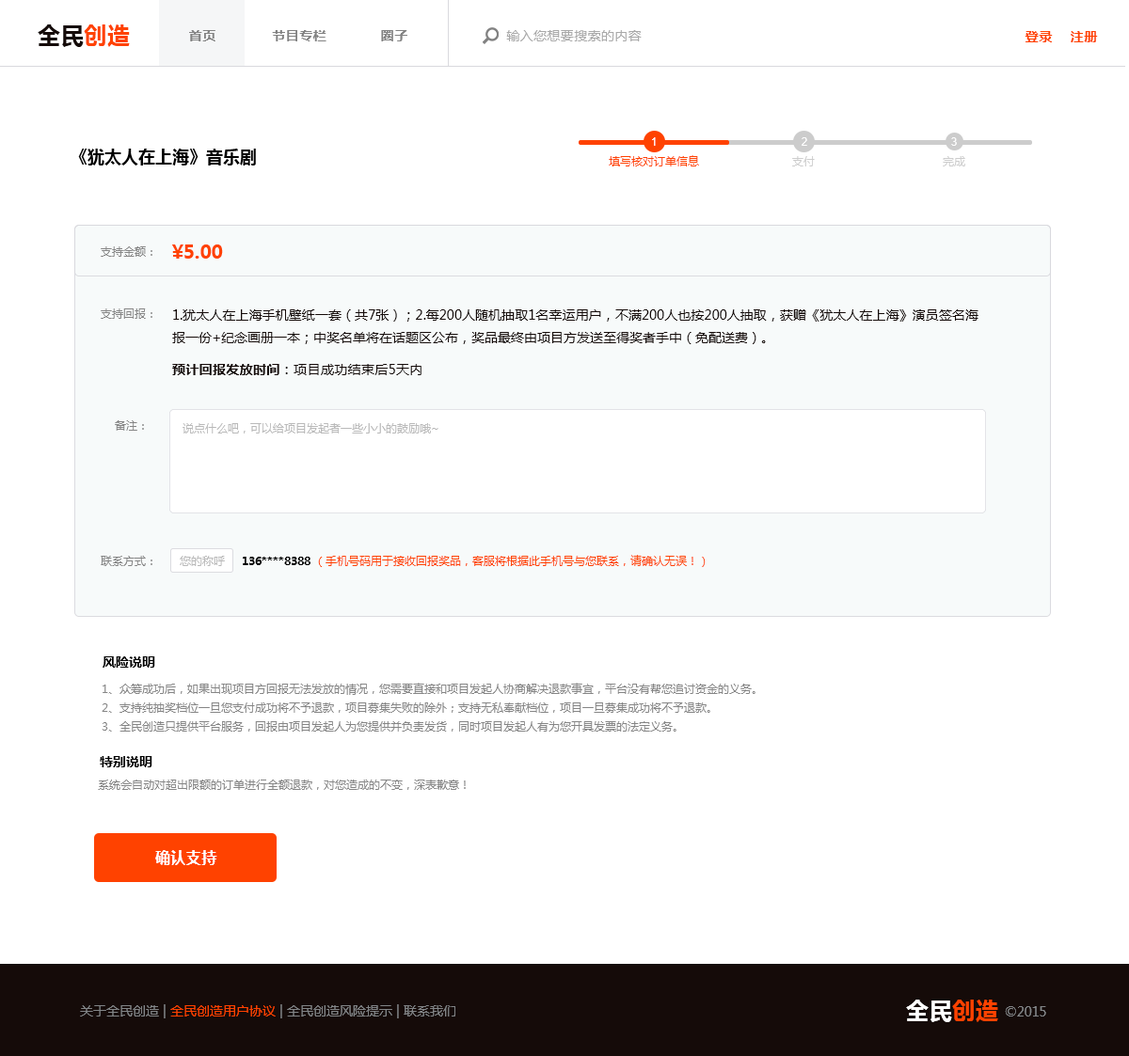
<style>
.page{position:relative;width:1129px;height:1056px;background:#ffffff}
.page>*{position:absolute;margin:0}
.t1{font:22.6px "MicrosoftYaHei-Bold";letter-spacing:0.025em;color:#150b09}
.t2{font:22.6px "MicrosoftYaHei-Bold";letter-spacing:0.025em;color:#ff4200}
.t3{font:13.2px "MicrosoftYaHei-Bold";letter-spacing:0.025em;color:#828282}
.t4{font:13.2px "MicrosoftYaHei";letter-spacing:0.025em;color:#a9a9a9}
.t5{font:13.2px "MicrosoftYaHei-Bold";letter-spacing:0.05em;color:#ff4200}
.t6{font:11.3px "ArialMT";letter-spacing:0.025em;color:#ffffff}
.t7{font:16.9px "MicrosoftYaHei-Bold";color:#000000}
.t8{font:11.3px "MicrosoftYaHei";color:#ff4200}
.t9{font:11.3px "MicrosoftYaHei";color:#cccccc}
.t10{font:18.8px "MicrosoftYaHei-Bold";color:#ff4200}
.t11{font:11.3px "MicrosoftYaHei";color:#858585}
.t12{font:13.2px/22.6px "MicrosoftYaHei";color:#150b09}
.t13{font:13.2px/16.9px "MicrosoftYaHei-Bold";letter-spacing:0.025em;color:#150b09}
.t14{font:13.2px/16.9px "MicrosoftYaHei";letter-spacing:0.025em;color:#150b09}
.t15{font:11.3px "MicrosoftYaHei";color:#b9b9b9}
.t16{font:11.3px "MicrosoftYaHei";color:#bababa}
.t17{font:11.3px "MicrosoftYaHei-Bold";color:#000000}
.t18{font:13.2px "MicrosoftYaHei-Bold";color:#000000}
.t19{font:11.3px/13.2px "MicrosoftYaHei";color:#858585}
.t20{font:15.1px "MicrosoftYaHei-Bold";letter-spacing:0.025em;color:#ffffff}
.t21{font:22.6px "MicrosoftYaHei-Bold";letter-spacing:0.025em;color:#ffffff}
.t22{font:13.2px "MicrosoftYaHei";color:#828587}
.t23{font:13.2px "MicrosoftYaHei";color:#ff4200}
</style>
<div class="page">
<p class="t1" style="left:38px;top:24px;width:92px;height:23px">全民<span class="t2">创造</span></p>
<p class="t3" style="left:189px;top:30px;width:26px;height:11px">首页</p>
<p class="t3" style="left:272px;top:30px;width:54px;height:11px">节目专栏</p>
<p class="t3" style="left:381px;top:30px;width:26px;height:11px">圈子</p>
<p class="t4" style="left:506px;top:30px;width:136px;height:11px">输入您想要搜索的内容</p>
<p class="t5" style="left:1024px;top:31px;width:29px;height:11px">登录</p>
<p class="t5" style="left:1070px;top:31px;width:28px;height:11px">注册</p>
<p class="t6" style="left:652px;top:137px;width:4px;height:9px">1</p>
<p class="t6" style="left:801px;top:137px;width:6px;height:9px">2</p>
<p class="t6" style="left:951px;top:137px;width:6px;height:9px">3</p>
<p class="t7" style="left:78px;top:149px;width:178px;height:17px">《犹太人在上海》音乐剧</p>
<p class="t8" style="left:609px;top:155px;width:90px;height:11px">填写核对订单信息</p>
<p class="t9" style="left:792px;top:156px;width:23px;height:10px">支付</p>
<p class="t9" style="left:943px;top:156px;width:22px;height:10px">完成</p>
<p class="t10" style="left:172px;top:245px;width:51px;height:14px">¥5.00</p>
<p class="t11" style="left:101px;top:246px;width:51px;height:11px">支持金额：</p>
<p class="t11" style="left:101px;top:309px;width:51px;height:10px">支持回报：</p>
<p class="t12" style="left:172px;top:309px;width:806px;height:66px;text-align:justify">1.犹太人在上海手机壁纸一套（共7张）；2.每200人随机抽取1名幸运用户，不满200人也按200人抽取，获赠《犹太人在上海》演员签名海报一份+纪念画册一本；中奖名单将在话题区公布，奖品最终由项目方发送至得奖者手中（免配送费）。<br><span class="t13">预计回报发放时间</span><span class="t14">：项目成功结束后5天内</span></p>
<p class="t11" style="left:115px;top:420px;width:29px;height:11px">备注：</p>
<p class="t15" style="left:182px;top:423px;width:256px;height:11px">说点什么吧，可以给项目发起者一些小小的鼓励哦~</p>
<p class="t11" style="left:101px;top:556px;width:51px;height:10px">联系方式：</p>
<p class="t16" style="left:180px;top:556px;width:45px;height:10px">您的称呼</p>
<p class="t17" style="left:243px;top:557px;width:67px;height:8px">136****8388</p>
<p class="t8" style="left:318px;top:555px;width:388px;height:12px">（手机号码用于接收回报奖品，客服将根据此手机号与您联系，请确认无误！）</p>
<p class="t18" style="left:103px;top:657px;width:52px;height:11px">风险说明</p>
<p class="t19" style="left:102px;top:683px;width:653px;height:49px">1、众筹成功后，如果出现项目方回报无法发放的情况，您需要直接和项目发起人协商解决退款事宜，平台没有帮您追讨资金的义务。 <br>2、支持纯抽奖档位一旦您支付成功将不予退款，项目募集失败的除外；支持无私奉献档位，项目一旦募集成功将不予退款。 <br>3、全民创造只提供平台服务，回报由项目发起人为您提供并负责发货，同时项目发起人有为您开具发票的法定义务。</p>
<p class="t18" style="left:100px;top:756px;width:52px;height:12px">特别说明</p>
<p class="t11" style="left:98px;top:780px;width:368px;height:10px">系统会自动对超出限额的订单进行全额退款，对您造成的不变，深表歉意！</p>
<p class="t20" style="left:155px;top:850px;width:62px;height:15px">确认支持</p>
<p class="t21" style="left:906px;top:1000px;width:92px;height:23px">全民<span class="t2">创造</span></p>
<p class="t22" style="left:80px;top:1005px;width:375px;height:14px">关于全民创造 | <span class="t23">全民创造用户协议</span> | 全民创造风险提示 | 联系我们</p>
<p class="t22" style="left:1005px;top:1007px;width:41px;height:10px">©2015</p>
</div>
